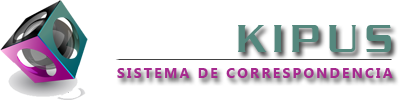
<style>
.page{position:relative;width:400px;height:100px;background:#ffffff}
.page>*{position:absolute;margin:0}
.t1{font:41px "Dungeon-Regular";letter-spacing:0.16em;color:#55887e}
.t2{font:14px "MicrosoftTaiLe-Bold";letter-spacing:0.16em;color:#a62a8f}
</style>
<div class="page">
<p class="t1" style="left:238px;top:25px;width:153px;height:27px">KIPUS</p>
<p class="t2" style="left:117px;top:68px;width:276px;height:10px">SISTEMA DE CORRESPONDENCIA</p>
</div>
